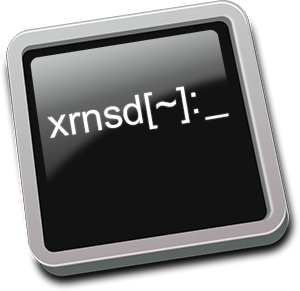
<style>
.page{position:relative;width:300px;height:291px;background:#121212}
.page>*{position:absolute;margin:0}
.t1{font:39.8px "ArialMT";color:#ffffff}
</style>
<div class="page">
<p class="t1" style="left:47px;top:86px;width:182px;height:52px;rotate:-10deg">xrnsd[~]:_</p>
</div>
